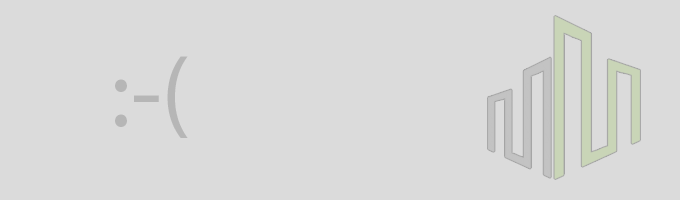
<style>
.page{position:relative;width:680px;height:200px;background:#dbdbdb}
.page>*{position:absolute;margin:0}
.t1{font:100px "MyriadPro-Regular";color:#b6b6b6}
</style>
<div class="page">
<p class="t1" style="left:115px;top:56px;width:73px;height:82px">:-(</p>
</div>
